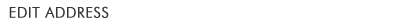
<style>
.page{position:relative;width:400px;height:24px;background:#ffffff}
.page>*{position:absolute;margin:0}
.t1{font:14.7px "FuturaBT-Light";letter-spacing:0.025em;color:#363636;text-transform:uppercase;font-weight:bold}
</style>
<div class="page">
<p class="t1" style="left:9px;top:6px;width:100px;height:12px">EDIT ADDRESS</p>
</div>
